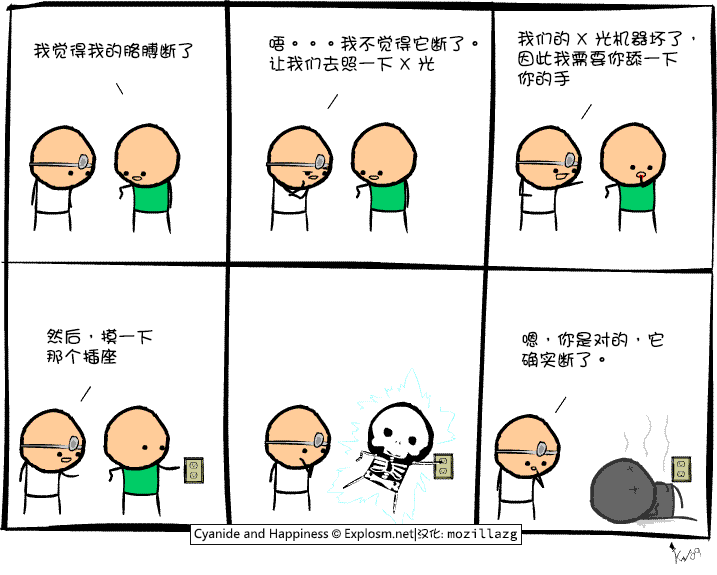
<style>
.page{position:relative;width:717px;height:575px;background:#ffffff}
.page>*{position:absolute;margin:0}
.t1{font:18px/20px "DFGirl";color:#000000}
.t2{font:18px "DFGirl";color:#000000}
</style>
<div class="page">
<p class="t1" style="left:517px;top:30px;width:178px;height:57px">我们的 X 光机器坏了，<br>因此我需要你舔一下<br>你的手</p>
<p class="t1" style="left:269px;top:35px;width:209px;height:37px">唔。。。我不觉得它断了。<br>让我们去照一下 X 光</p>
<p class="t2" style="left:33px;top:42px;width:160px;height:17px">我觉得我的胳膊断了</p>
<p class="t1" style="left:47px;top:328px;width:106px;height:37px">然后，摸一下<br>那个插座</p>
<p class="t1" style="left:521px;top:331px;width:143px;height:37px">嗯，你是对的，它<br>确实断了。</p>
</div>
